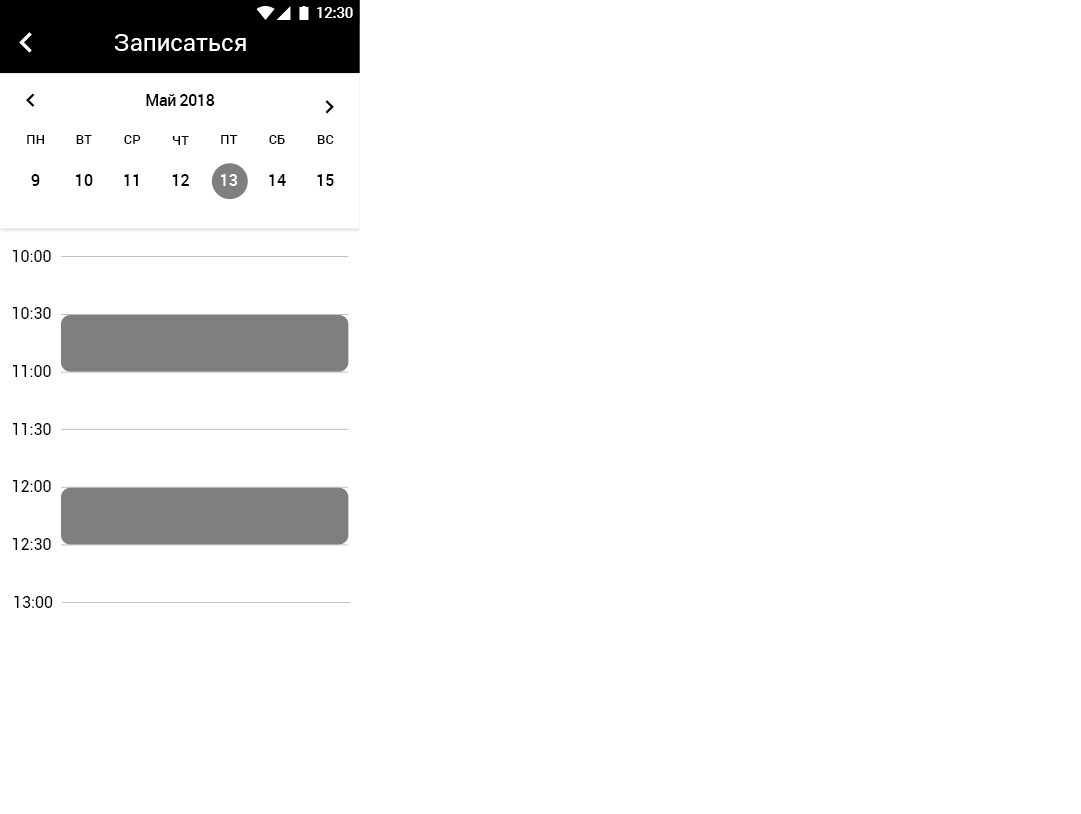
<style>
.page{position:relative;width:1081px;height:814px;background:#ffffff}
.page>*{position:absolute;margin:0}
.t1{font:14.7px "Roboto-Medium";color:#ffffff}
.t2{font:24px "Roboto-Regular";color:#ffffff}
.t3{font:16px "Roboto-Medium";letter-spacing:-0.023em;color:#000000}
.t4{font:13.3px "Roboto-Medium";color:#000000}
.t5{font:16px "Roboto-Medium";color:#000000}
.t6{font:16px "Roboto-Medium";color:#ffffff}
.t7{font:16px "Roboto-Regular";color:#000000}
</style>
<div class="page">
<p class="t1" style="left:317px;top:7px;width:36px;height:11px">12:30</p>
<p class="t2" style="left:115px;top:34px;width:131px;height:17px">Записаться</p>
<p class="t3" style="left:146px;top:94px;width:69px;height:12px">Май 2018</p>
<p class="t4" style="left:27px;top:135px;width:18px;height:9px">ПН</p>
<p class="t4" style="left:76px;top:135px;width:16px;height:9px">ВТ</p>
<p class="t4" style="left:124px;top:135px;width:17px;height:9px">СР</p>
<p class="t4" style="left:172px;top:136px;width:17px;height:9px">ЧТ</p>
<p class="t4" style="left:221px;top:135px;width:17px;height:9px">ПТ</p>
<p class="t4" style="left:269px;top:135px;width:16px;height:9px">СБ</p>
<p class="t4" style="left:317px;top:135px;width:17px;height:9px">ВС</p>
<p class="t5" style="left:31px;top:174px;width:9px;height:12px">9</p>
<p class="t5" style="left:76px;top:174px;width:17px;height:12px">10</p>
<p class="t5" style="left:124px;top:174px;width:14px;height:12px">11</p>
<p class="t5" style="left:172px;top:174px;width:17px;height:12px">12</p>
<p class="t6" style="left:221px;top:174px;width:16px;height:12px">13</p>
<p class="t5" style="left:269px;top:174px;width:17px;height:12px">14</p>
<p class="t5" style="left:317px;top:174px;width:17px;height:12px">15</p>
<p class="t7" style="left:12px;top:250px;width:39px;height:12px">10:00</p>
<p class="t7" style="left:12px;top:307px;width:39px;height:12px">10:30</p>
<p class="t7" style="left:12px;top:365px;width:39px;height:12px">11:00</p>
<p class="t7" style="left:12px;top:423px;width:39px;height:12px">11:30</p>
<p class="t7" style="left:12px;top:480px;width:39px;height:12px">12:00</p>
<p class="t7" style="left:12px;top:538px;width:39px;height:12px">12:30</p>
<p class="t7" style="left:14px;top:596px;width:39px;height:12px">13:00</p>
</div>
